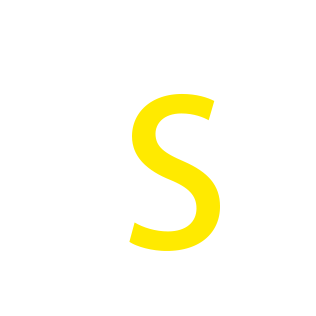
<style>
.page{position:relative;width:316px;height:316px;background:#ffffff}
.page>*{position:absolute;margin:0}
.t1{font:200px "AdobeHeitiStd-Regular";color:#ffea00}
</style>
<div class="page">
<p class="t1" style="left:129px;top:93px;width:91px;height:158px">S</p>
</div>
